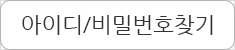
<style>
.page{position:relative;width:235px;height:50px;background:#ffffff}
.page>*{position:absolute;margin:0}
.t1{font:22px "NanumGothic";color:#333333}
</style>
<div class="page">
<p class="t1" style="left:22px;top:15px;width:191px;height:20px">아이디/비밀번호찾기</p>
</div>
